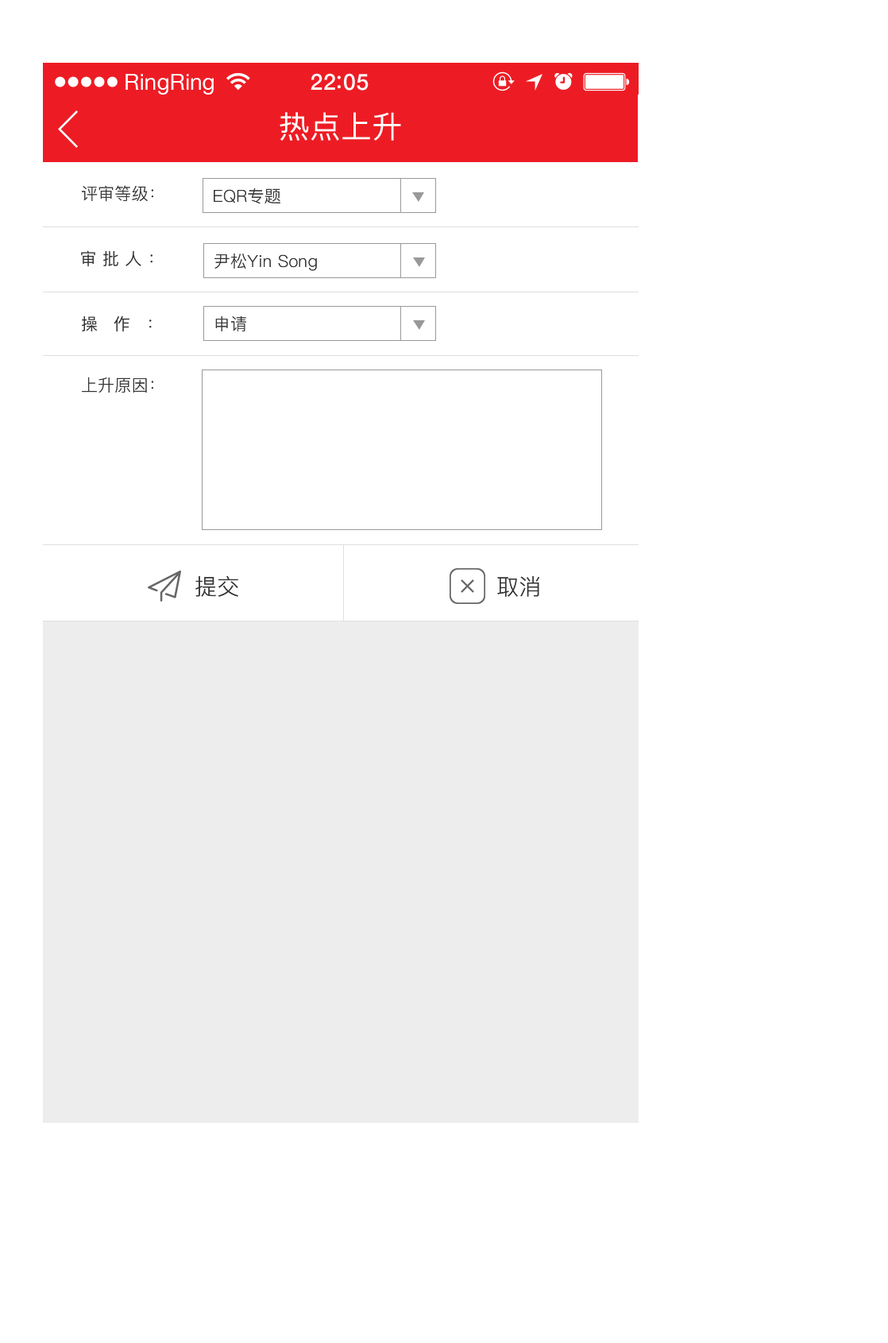
<style>
.page{position:relative;width:888px;height:1343px;background:#ffffff}
.page>*{position:absolute;margin:0}
.t1{font:22.3px "HelveticaNeue";color:#ffffff}
.t2{font:22.3px "HelveticaNeue-Medium";letter-spacing:0.03em;color:#ffffff}
.t3{font:30.7px "PingFangSC-Regular";letter-spacing:0.01em;color:#ffffff}
.t4{font:16.7px "PingFang-SC-Regular";letter-spacing:0.01em;color:#333333}
.t5{font:16.7px "PingFangSC-Regular";letter-spacing:0.35em;color:#333333}
.t6{font:16.7px "PingFangSC-Regular";letter-spacing:0.95em;color:#333333}
.t7{font:22.2px "PingFang-SC-Regular";letter-spacing:0.01em;color:#333333}
</style>
<div class="page">
<p class="t1" style="left:126px;top:74px;width:88px;height:21px">RingRing</p>
<p class="t2" style="left:311px;top:73px;width:58px;height:18px">22 05</p>
<p class="t3" style="left:280px;top:112px;width:121px;height:29px">热点上升</p>
<p class="t4" style="left:82px;top:185px;width:71px;height:17px">评审等级：</p>
<p class="t4" style="left:214px;top:187px;width:66px;height:17px">EQR专题</p>
<p class="t5" style="left:81px;top:250px;width:72px;height:17px">审批人：</p>
<p class="t4" style="left:214px;top:253px;width:103px;height:18px">尹松Yin Song</p>
<p class="t6" style="left:82px;top:315px;width:70px;height:17px">操作：</p>
<p class="t4" style="left:215px;top:315px;width:31px;height:16px">申请</p>
<p class="t4" style="left:82px;top:377px;width:71px;height:15px">上升原因：</p>
<p class="t7" style="left:195px;top:576px;width:43px;height:21px">提交</p>
<p class="t7" style="left:497px;top:576px;width:42px;height:21px">取消</p>
</div>
